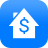
<style>
.page{position:relative;width:48px;height:48px;background:#007aff}
.page>*{position:absolute;margin:0}
.t1{font:18.1px "Roboto-Regular";color:#007aff;scale:1.15 1}
</style>
<div class="page">
<p class="t1" style="left:19px;top:17px;width:10px;height:17px">$</p>
</div>
